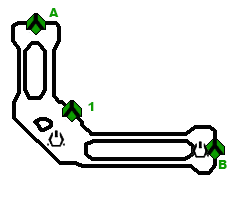
<style>
.page{position:relative;width:230px;height:200px;background:#ffffff}
.page>*{position:absolute;margin:0}
.t1{font:12px "Arial-Black";color:#0d9e01}
</style>
<div class="page">
<p class="t1" style="left:49px;top:8px;width:10px;height:9px">A</p>
<p class="t1" style="left:88px;top:102px;width:6px;height:9px">1</p>
<p class="t1" style="left:218px;top:160px;width:9px;height:9px">B</p>
</div>
